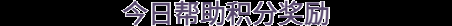
<style>
.page{position:relative;width:452px;height:26px;background:#000000}
.page>*{position:absolute;margin:0}
.t1{font:26px "WebPSD-18463539-0-Regular";color:#59496e;font-weight:bold}
</style>
<div class="page">
<p class="t1" style="left:0px;top:0px;width:452px;height:26px">今日帮助积分奖励</p>
</div>
